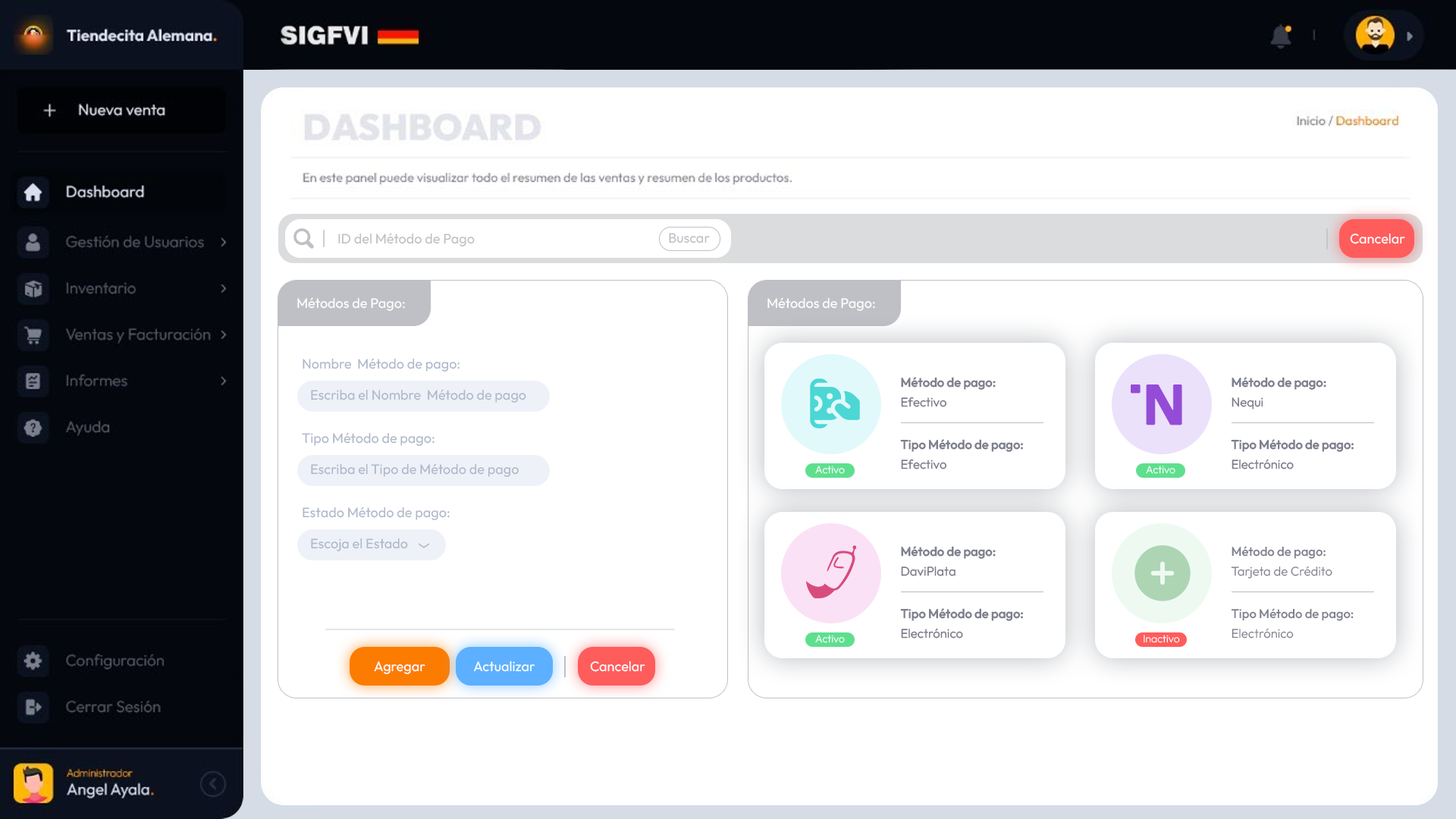
<style>
.page{position:relative;width:1456px;height:819px;background:#ffffff}
.page>*{position:absolute;margin:0}
.t1{font:13.7px "Outfit-Regular";color:#bec0c5}
.t2{font:13.7px "Outfit-Regular";color:#ffffff}
.t3{font:13.7px "Outfit-Regular";color:#afb8ca}
.t4{font:12.6px "Outfit-Medium";color:#7e808d}
.t5{font:12.6px "Outfit-Light";color:#7c7e8b}
.t6{font:10.5px "Outfit-ExtraLight";color:#ffffff}
</style>
<div class="page">
<p class="t1" style="left:338px;top:233px;width:137px;height:13px">ID del Método de Pago</p>
<p class="t1" style="left:669px;top:233px;width:41px;height:10px">Buscar</p>
<p class="t2" style="left:1350px;top:233px;width:55px;height:11px">Cancelar</p>
<p class="t2" style="left:297px;top:297px;width:108px;height:14px">Métodos de Pago:</p>
<p class="t2" style="left:767px;top:297px;width:108px;height:14px">Métodos de Pago:</p>
<p class="t3" style="left:303px;top:358px;width:157px;height:14px">Nombre  Método de pago:</p>
<p class="t4" style="left:901px;top:377px;width:95px;height:13px">Método de pago:</p>
<p class="t4" style="left:1232px;top:377px;width:94px;height:13px">Método de pago:</p>
<p class="t3" style="left:311px;top:389px;width:215px;height:14px">Escriba el Nombre  Método de pago</p>
<p class="t5" style="left:901px;top:397px;width:45px;height:10px">Efectivo</p>
<p class="t5" style="left:1232px;top:397px;width:31px;height:12px">Nequi</p>
<p class="t3" style="left:302px;top:432px;width:133px;height:14px">Tipo Método de pago:</p>
<p class="t4" style="left:900px;top:439px;width:123px;height:13px">Tipo Método de pago:</p>
<p class="t4" style="left:1231px;top:439px;width:123px;height:13px">Tipo Método de pago:</p>
<p class="t5" style="left:901px;top:459px;width:45px;height:10px">Efectivo</p>
<p class="t5" style="left:1232px;top:459px;width:62px;height:10px">Electrónico</p>
<p class="t3" style="left:311px;top:463px;width:208px;height:14px">Escriba el Tipo de Método de pago</p>
<p class="t6" style="left:815px;top:466px;width:30px;height:8px">Activo</p>
<p class="t6" style="left:1146px;top:466px;width:29px;height:8px">Activo</p>
<p class="t3" style="left:303px;top:507px;width:147px;height:13px">Estado Método de pago:</p>
<p class="t3" style="left:311px;top:538px;width:97px;height:13px">Escoja el Estado</p>
<p class="t4" style="left:901px;top:546px;width:95px;height:13px">Método de pago:</p>
<p class="t4" style="left:1232px;top:546px;width:94px;height:13px">Método de pago:</p>
<p class="t5" style="left:901px;top:566px;width:54px;height:10px">DaviPlata</p>
<p class="t5" style="left:1231px;top:566px;width:101px;height:13px">Tarjeta de Crédito</p>
<p class="t4" style="left:900px;top:608px;width:123px;height:13px">Tipo Método de pago:</p>
<p class="t4" style="left:1231px;top:608px;width:123px;height:13px">Tipo Método de pago:</p>
<p class="t5" style="left:901px;top:628px;width:62px;height:11px">Electrónico</p>
<p class="t5" style="left:1232px;top:628px;width:62px;height:11px">Electrónico</p>
<p class="t6" style="left:815px;top:635px;width:30px;height:8px">Activo</p>
<p class="t6" style="left:1144px;top:635px;width:36px;height:8px">Inactivo</p>
<p class="t2" style="left:374px;top:661px;width:51px;height:13px">Agregar</p>
<p class="t2" style="left:473px;top:660px;width:62px;height:12px">Actualizar</p>
<p class="t2" style="left:590px;top:660px;width:55px;height:12px">Cancelar</p>
</div>
